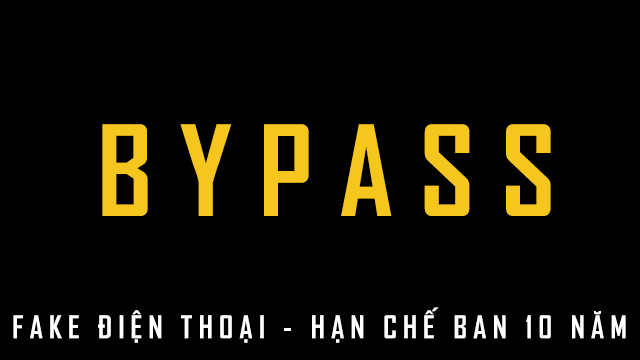
<style>
.page{position:relative;width:640px;height:360px;background:#000000}
.page>*{position:absolute;margin:0}
.t1{font:120px "SVN-AgencyFBbold";letter-spacing:0.22em;color:#f5c61e}
.t2{font:30px "SVN-AgencyFBbold";letter-spacing:0.2em;color:#ffffff}
</style>
<div class="page">
<p class="t1" style="left:102px;top:124px;width:449px;height:92px">BYPASS</p>
<p class="t2" style="left:13px;top:307px;width:613px;height:36px">FAKE ĐIỆN THOẠI - HẠN CHẾ BAN 10 NĂM</p>
</div>
